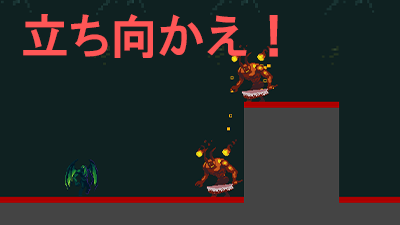
<style>
.page{position:relative;width:400px;height:225px;background:#0f2121}
.page>*{position:absolute;margin:0}
.t1{font:48px "HGPGothicE";color:#ff5656}
</style>
<div class="page">
<p class="t1" style="left:23px;top:14px;width:255px;height:44px">立ち向かえ！</p>
</div>
